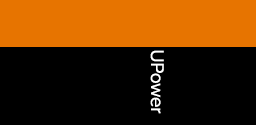
<style>
.page{position:relative;width:256px;height:125px;background:#000000}
.page>*{position:absolute;margin:0}
.t1{font:19px "FONTSPRINGDEMO-ProximaNovaRegular";letter-spacing:-0.02em;color:#ffffff}
</style>
<div class="page">
<p class="t1" style="left:150px;top:50px;width:14px;height:64px;rotate:90deg">UPower</p>
</div>
